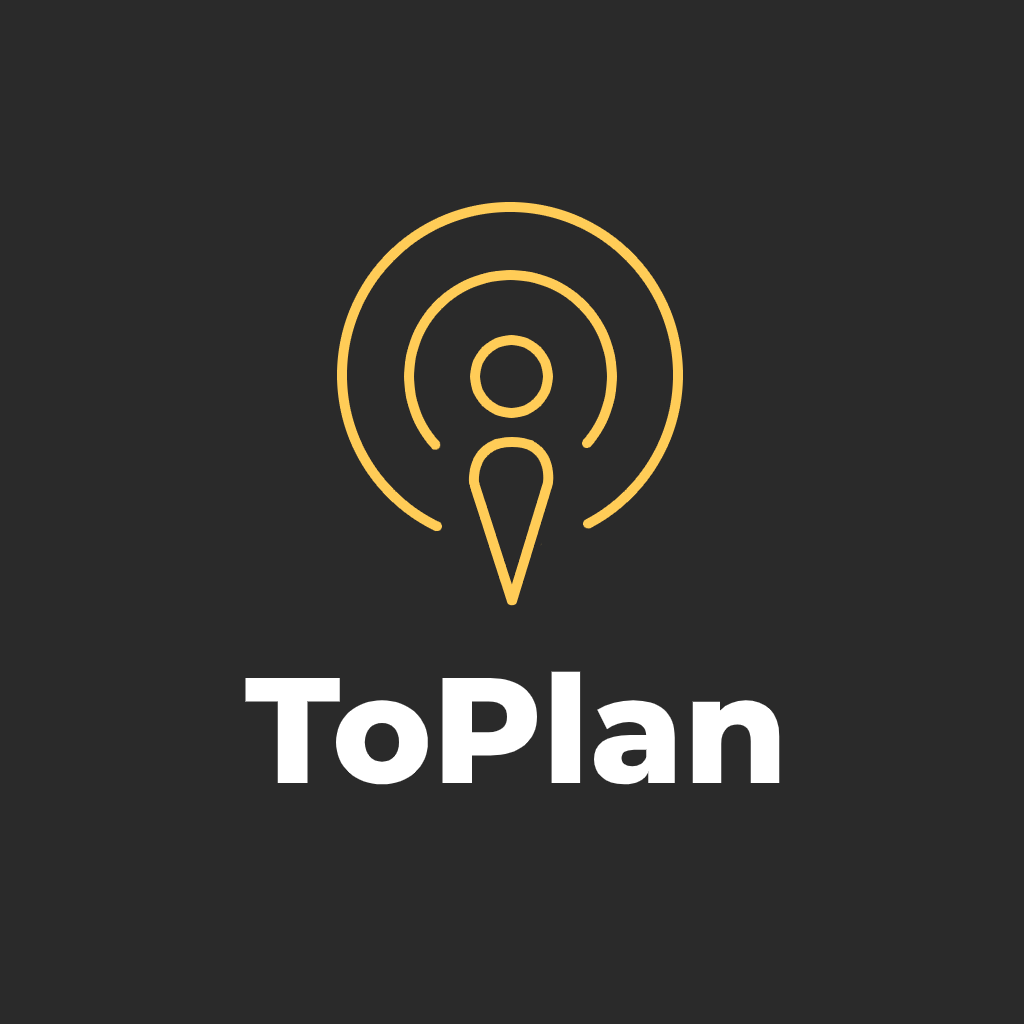
<style>
.page{position:relative;width:1024px;height:1024px;background:#2a2a2a}
.page>*{position:absolute;margin:0}
.t1{font:150px "Montserrat-ExtraBold";color:#ffffff}
</style>
<div class="page">
<p class="t1" style="left:245px;top:671px;width:535px;height:114px">ToPlan</p>
</div>
